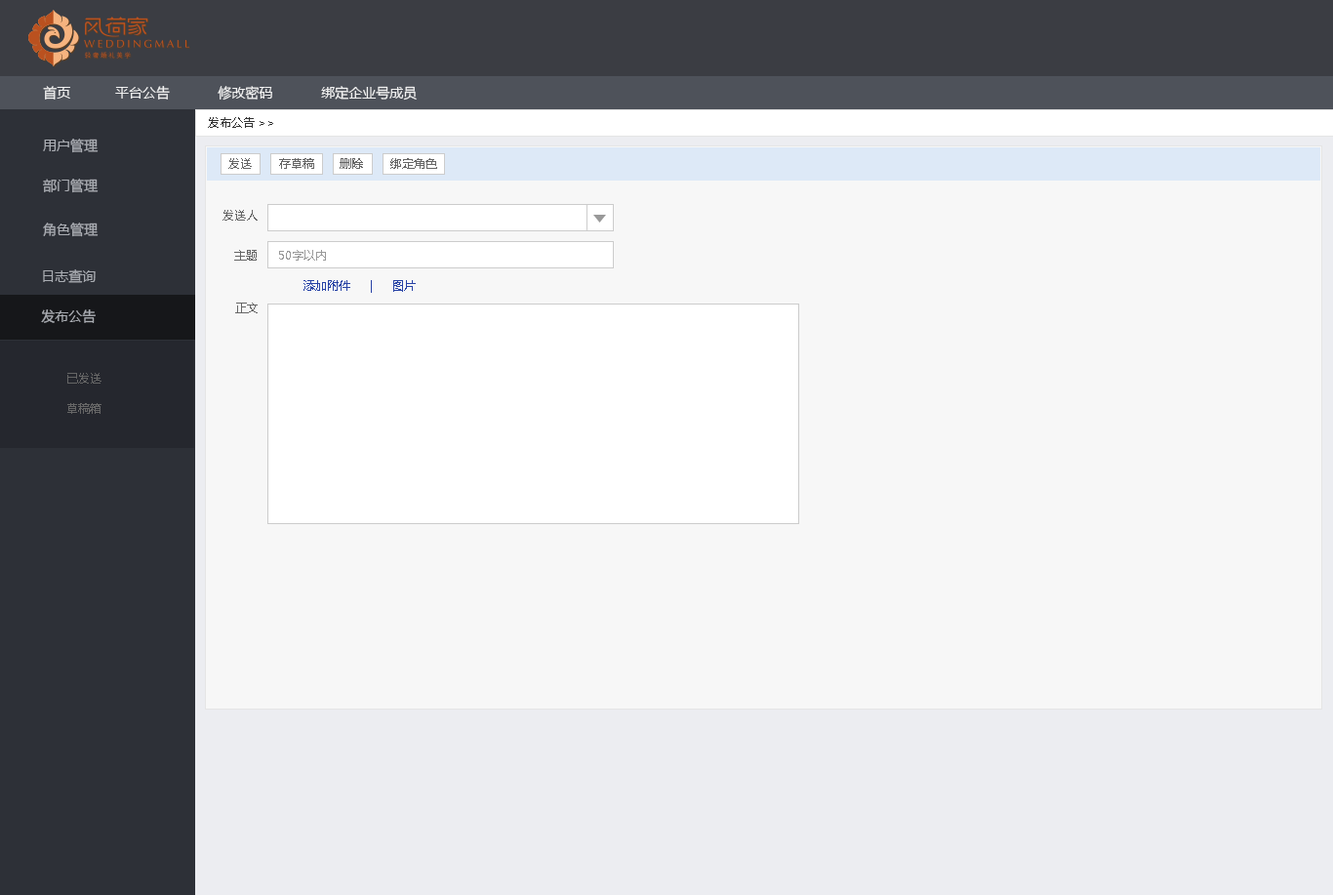
<style>
.page{position:relative;width:1333px;height:895px;background:#f7f7f7}
.page>*{position:absolute;margin:0}
.t1{font:13.7px "MicrosoftYaHei";color:#f2f2f2}
.t2{font:11.7px "MicrosoftYaHei";color:#333333}
.t3{font:13.7px/40px "MicrosoftYaHei";color:#aaadb3}
.t4{font:11.7px "MicrosoftYaHei";color:#666666}
.t5{font:11.7px/40px "MicrosoftYaHei";color:#666666}
.t6{font:13.7px "MicrosoftYaHei";color:#aaadb3}
.t7{font:11.7px "MicrosoftYaHei";color:#999999}
.t8{font:11.7px "MicrosoftYaHei";color:#2843a5}
.t9{font:11.7px/30.2px "MicrosoftYaHei";color:#666666}
</style>
<div class="page">
<p class="t1" style="left:43px;top:86px;width:374px;height:14px">首页           平台公告            修改密码            绑定企业号成员</p>
<p class="t2" style="left:208px;top:117px;width:65px;height:11px">发布公告&gt;&gt;</p>
<p class="t3" style="left:43px;top:139px;width:56px;height:54px">用户管理<br>部门管理</p>
<p class="t4" style="left:228px;top:158px;width:86px;height:11px">发送       存草稿</p>
<p class="t4" style="left:340px;top:158px;width:97px;height:11px">删除       绑定角色</p>
<p class="t5" style="left:222px;top:210px;width:36px;height:51px;text-align:right">发送人<br>主题</p>
<p class="t6" style="left:43px;top:222px;width:56px;height:15px">角色管理</p>
<p class="t7" style="left:279px;top:250px;width:47px;height:11px">50字以内</p>
<p class="t3" style="left:41px;top:269px;width:55px;height:54px">日志查询<br>发布公告</p>
<p class="t8" style="left:303px;top:280px;width:113px;height:13px">添加附件     |     图片</p>
<p class="t4" style="left:235px;top:302px;width:23px;height:11px">正文</p>
<p class="t9" style="left:67px;top:373px;width:34px;height:41px">已发送<br>草稿箱</p>
</div>
